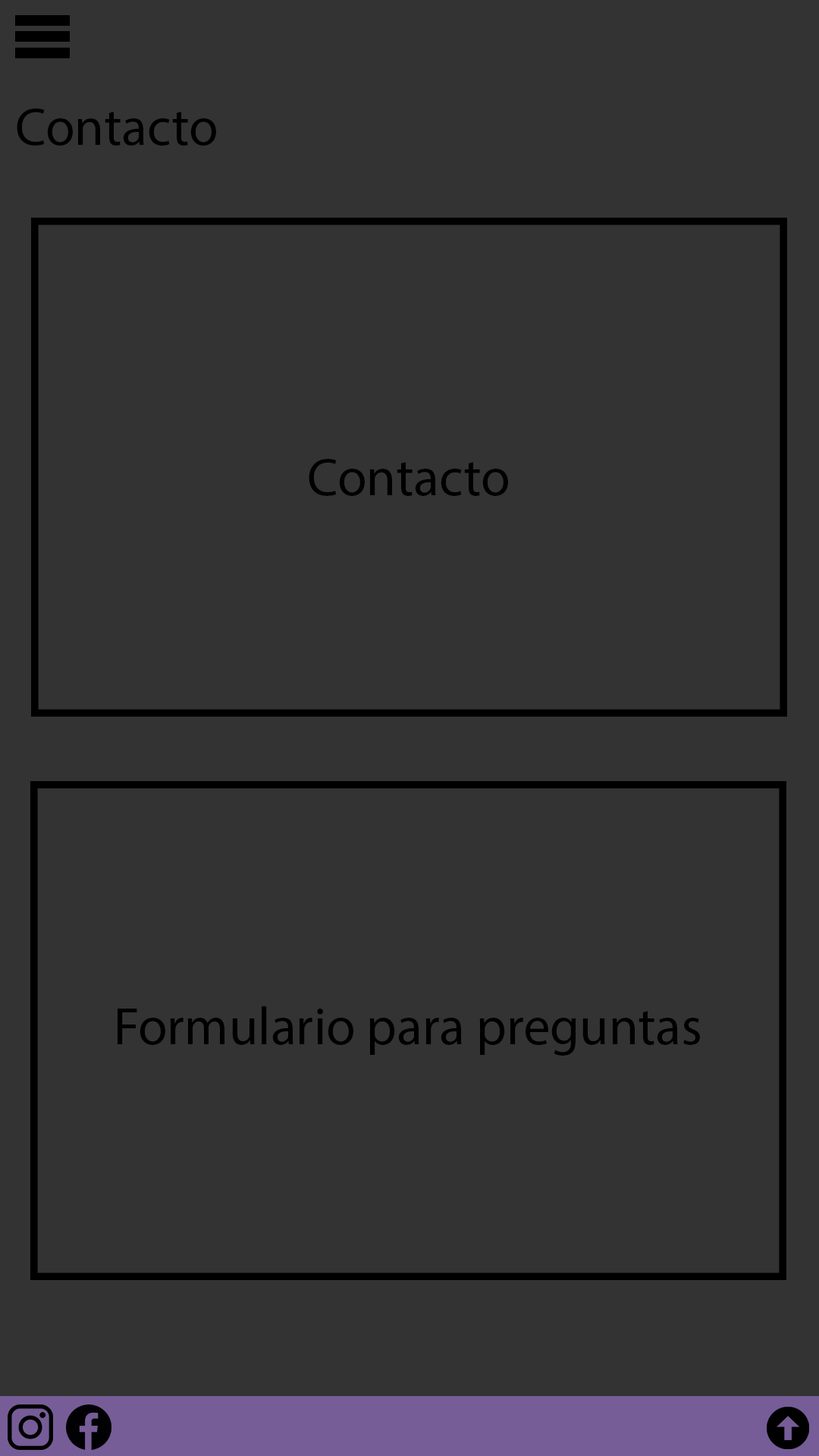
<style>
.page{position:relative;width:819px;height:1456px;background:#333333}
.page>*{position:absolute;margin:0}
.t1{font:53.1px "MyriadPro-Regular";color:#000000}
</style>
<div class="page">
<p class="t1" style="left:17px;top:108px;width:199px;height:38px">Contacto</p>
<p class="t1" style="left:309px;top:459px;width:199px;height:37px">Contacto</p>
<p class="t1" style="left:118px;top:1006px;width:582px;height:50px">Formulario para preguntas</p>
</div>
